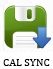
<style>
.page{position:relative;width:53px;height:69px;background:#ffffff}
.page>*{position:absolute;margin:0}
.t1{font:11px "Cambria";color:#000000}
</style>
<div class="page">
<p class="t1" style="left:3px;top:59px;width:47px;height:7px">CAL SYNC</p>
</div>
